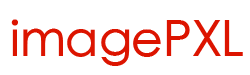
<style>
.page{position:relative;width:250px;height:75px;background:#ffffff}
.page>*{position:absolute;margin:0}
.t1{font:48.6px "STHeitiTC-Medium";color:#dc1400}
</style>
<div class="page">
<p class="t1" style="left:11px;top:19px;width:232px;height:47px">imagePXL</p>
</div>
